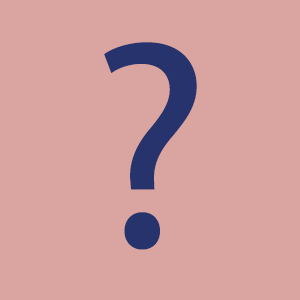
<style>
.page{position:relative;width:300px;height:300px;background:#daa5a1}
.page>*{position:absolute;margin:0}
.t1{font:297.8px "MyriadPro-Regular";color:#27336d}
</style>
<div class="page">
<p class="t1" style="left:104px;top:42px;width:93px;height:208px">?</p>
</div>
